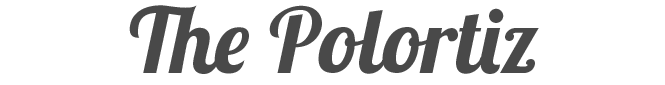
<style>
.page{position:relative;width:665px;height:85px;background:#ffffff}
.page>*{position:absolute;margin:0}
.t1{font:90px "Lobster1.4";color:#494949}
</style>
<div class="page">
<p class="t1" style="left:129px;top:5px;width:410px;height:69px">The Polortiz</p>
</div>
